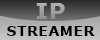
<style>
.page{position:relative;width:100px;height:40px}
.page>*{position:absolute;margin:0}
.t1{font:21.9px "Verdana-Bold";color:#a0a0a0;text-transform:uppercase;scale:1.04 1}
.t2{font:14px "Verdana-Bold";color:#000000;text-transform:uppercase}
</style>
<div class="page">
<p class="t1" style="left:36px;top:3px;width:29px;height:16px">IP</p>
<p class="t2" style="left:7px;top:26px;width:88px;height:10px">streamer</p>
</div>
